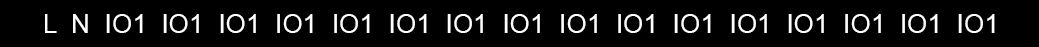
<style>
.page{position:relative;width:1039px;height:47px;background:#000000}
.page>*{position:absolute;margin:0}
.t1{font:26.2px "ArialMT";color:#ffffff}
</style>
<div class="page">
<p class="t1" style="left:45px;top:14px;width:950px;height:19px">L  N  IO1  IO1  IO1  IO1  IO1  IO1  IO1  IO1  IO1  IO1  IO1  IO1  IO1  IO1  IO1  IO1</p>
</div>
